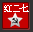
<style>
.page{position:relative;width:33px;height:32px;background:#c50000}
.page>*{position:absolute;margin:0}
.t1{font:10.4px "SimSun";letter-spacing:-0.25em;color:#ffffff}
</style>
<div class="page">
<p class="t1" style="left:4px;top:4px;width:25px;height:8px">红二七</p>
</div>
